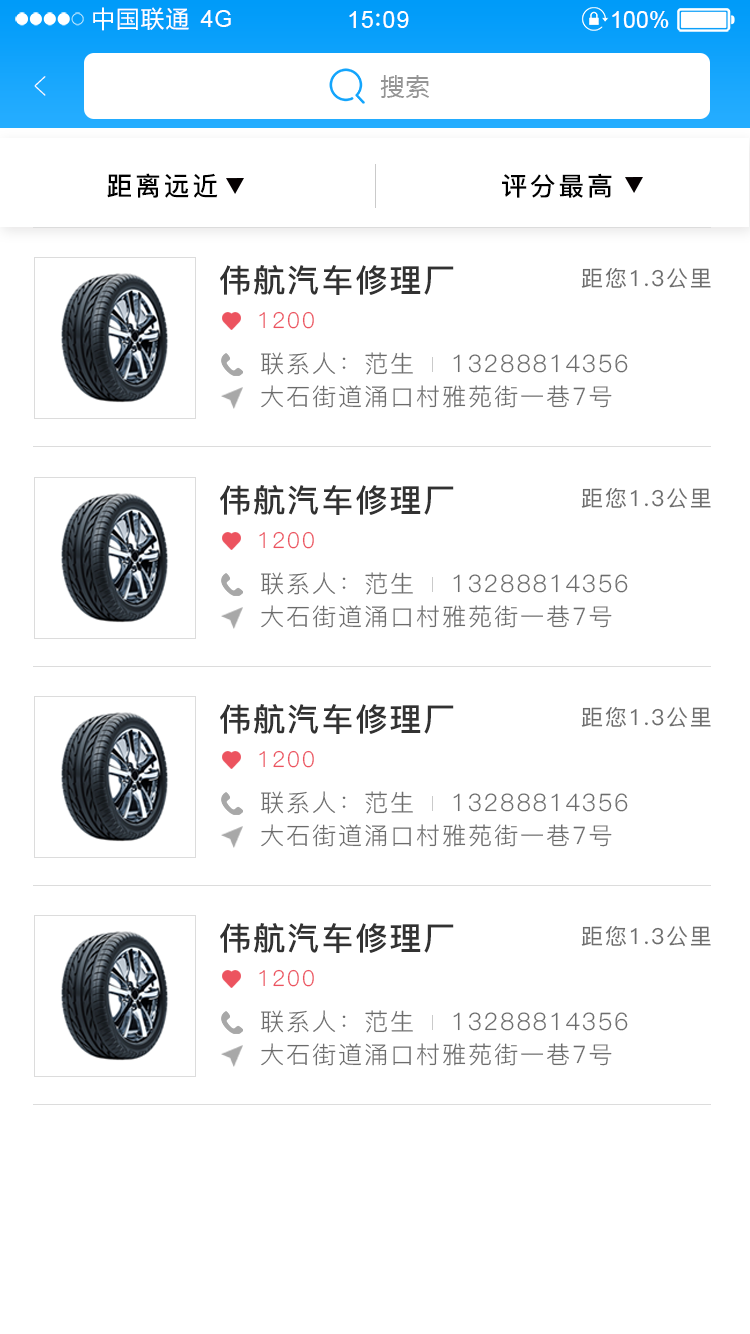
<style>
.page{position:relative;width:750px;height:1334px;background:#ffffff}
.page>*{position:absolute;margin:0}
.t1{font:23.4px "MicrosoftYaHei";letter-spacing:0.06em;color:#ffffff}
.t2{font:23.4px "ArialMT";letter-spacing:0.02em;color:#ffffff}
.t3{font:23.4px "ArialMT";letter-spacing:0.04em;color:#ffffff}
.t4{font:23.4px "ArialMT";color:#ffffff}
.t5{font:39px "PingFang-SC-ExtraLight";letter-spacing:0.1em;color:#ffffff;scale:0.51 1}
.t6{font:24px "MicrosoftYaHei";letter-spacing:0.05em;color:#959595}
.t7{font:26px "PingFang-SC-Bold";letter-spacing:0.1em;color:#000000}
.t8{font:25.7px "PingFang-SC-Bold";letter-spacing:0.1em;color:#000000}
.t9{font:32px "PingFang-SC-Bold";letter-spacing:0.05em;color:#323232}
.t10{font:22px "PingFang-SC-Medium";letter-spacing:0.075em;color:#6c6c6c}
.t11{font:22px "PingFang-SC-Regular";letter-spacing:0.075em;color:#ec535f}
.t12{font:24px "PingFang-SC-Regular";letter-spacing:0.075em;color:#6c6c6c}
</style>
<div class="page">
<p class="t1" style="left:93px;top:7px;width:96px;height:24px">中国联通</p>
<p class="t2" style="left:200px;top:10px;width:31px;height:17px">4G</p>
<p class="t3" style="left:349px;top:11px;width:60px;height:17px">15 09</p>
<p class="t4" style="left:612px;top:11px;width:57px;height:17px">100%</p>
<p class="t5" style="left:34px;top:76px;width:12px;height:20px;rotate:180deg">&gt;</p>
<p class="t6" style="left:380px;top:75px;width:49px;height:23px">搜索</p>
<p class="t7" style="left:107px;top:173px;width:111px;height:25px">距离远近</p>
<p class="t8" style="left:502px;top:173px;width:110px;height:25px">评分最高</p>
<p class="t9" style="left:220px;top:265px;width:234px;height:30px">伟航汽车修理厂</p>
<p class="t10" style="left:581px;top:268px;width:130px;height:21px">距您1.3公里</p>
<p class="t11" style="left:259px;top:311px;width:55px;height:18px">1200</p>
<p class="t12" style="left:261px;top:352px;width:152px;height:23px">联系人：范生</p>
<p class="t12" style="left:453px;top:354px;width:175px;height:19px">13288814356</p>
<p class="t12" style="left:261px;top:385px;width:351px;height:23px">大石街道涌口村雅苑街一巷7号</p>
<p class="t9" style="left:220px;top:485px;width:234px;height:30px">伟航汽车修理厂</p>
<p class="t10" style="left:581px;top:488px;width:130px;height:21px">距您1.3公里</p>
<p class="t11" style="left:259px;top:531px;width:55px;height:18px">1200</p>
<p class="t12" style="left:261px;top:572px;width:152px;height:23px">联系人：范生</p>
<p class="t12" style="left:453px;top:574px;width:175px;height:19px">13288814356</p>
<p class="t12" style="left:261px;top:605px;width:351px;height:23px">大石街道涌口村雅苑街一巷7号</p>
<p class="t9" style="left:220px;top:704px;width:234px;height:30px">伟航汽车修理厂</p>
<p class="t10" style="left:581px;top:707px;width:130px;height:21px">距您1.3公里</p>
<p class="t11" style="left:259px;top:750px;width:55px;height:18px">1200</p>
<p class="t12" style="left:261px;top:791px;width:152px;height:23px">联系人：范生</p>
<p class="t12" style="left:453px;top:793px;width:175px;height:19px">13288814356</p>
<p class="t12" style="left:261px;top:824px;width:351px;height:23px">大石街道涌口村雅苑街一巷7号</p>
<p class="t9" style="left:220px;top:923px;width:234px;height:30px">伟航汽车修理厂</p>
<p class="t10" style="left:581px;top:926px;width:130px;height:21px">距您1.3公里</p>
<p class="t11" style="left:259px;top:969px;width:55px;height:18px">1200</p>
<p class="t12" style="left:261px;top:1010px;width:152px;height:23px">联系人：范生</p>
<p class="t12" style="left:453px;top:1012px;width:175px;height:19px">13288814356</p>
<p class="t12" style="left:261px;top:1043px;width:351px;height:23px">大石街道涌口村雅苑街一巷7号</p>
</div>
